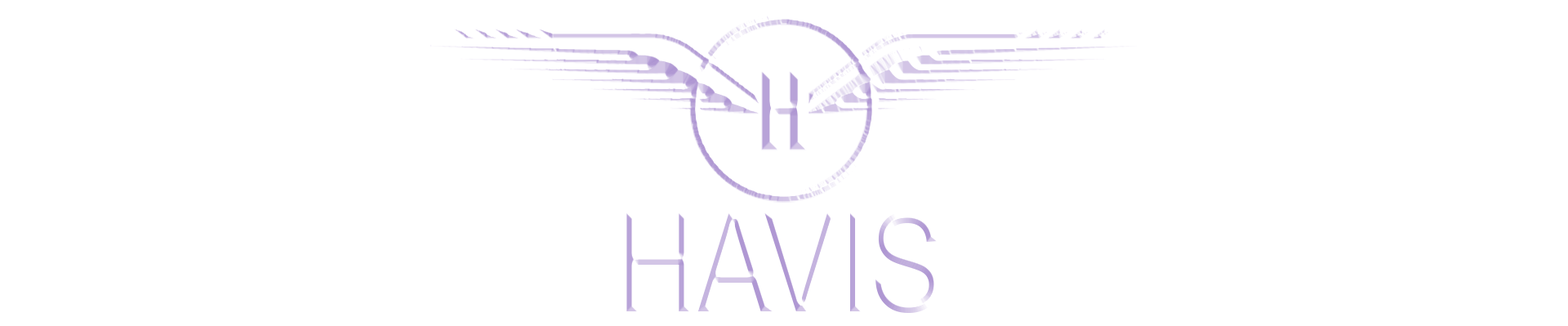
<style>
.page{position:relative;width:1568px;height:326px;background:#ffffff}
.page>*{position:absolute;margin:0}
.t1{font:136.1px "ArialNarrow"}
</style>
<div class="page">
<p class="t1" style="left:626px;top:212px;width:314px;height:101px">HAVIS</p>
</div>
